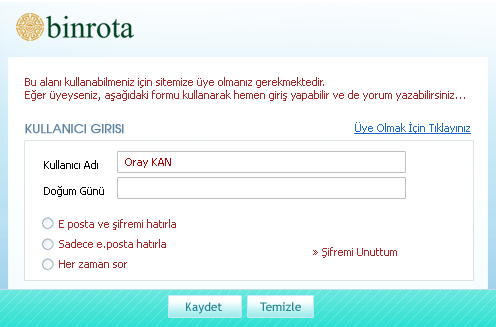
<style>
.page{position:relative;width:496px;height:327px;background:#ffffff}
.page>*{position:absolute;margin:0}
.t1{font:11px "Tahoma";color:#ab2626}
.t2{font:12px "TRAvalonPlain";color:#5e82a6;font-weight:bold}
.t3{font:11px "Tahoma";color:#1d6ccd;text-decoration:underline}
.t4{font:11px "Tahoma";color:#000000}
.t5{font:11px "Tahoma";color:#ad0505}
.t6{font:11px/20px "Tahoma";color:#ab2626}
.t7{font:12px "TrebuchetMS";color:#288493}
</style>
<div class="page">
<p class="t1" style="left:25px;top:77px;width:440px;height:24px">Bu alanı kullanabilmeniz için sitemize üye olmanız gerekmektedir. <br>Eğer üyeyseniz, aşağıdaki formu kullanarak hemen giriş yapabilir ve de yorum yazabilirsiniz...</p>
<p class="t2" style="left:25px;top:124px;width:99px;height:10px">KULLANICI GIRISI</p>
<p class="t3" style="left:354px;top:122px;width:117px;height:12px">Üye Olmak İçin Tıklayınız</p>
<p class="t4" style="left:44px;top:160px;width:54px;height:9px">Kullanıcı Adı</p>
<p class="t5" style="left:125px;top:158px;width:46px;height:10px">Oray KAN</p>
<p class="t4" style="left:44px;top:186px;width:60px;height:11px">Doğum Günü</p>
<p class="t6" style="left:59px;top:219px;width:117px;height:49px">E posta ve şifremi hatırla<br>Sadece e.posta hatırla<br>Her zaman sor</p>
<p class="t1" style="left:313px;top:247px;width:84px;height:11px">» Şifremi Unuttum</p>
<p class="t7" style="left:186px;top:302px;width:36px;height:12px">Kaydet</p>
<p class="t7" style="left:260px;top:302px;width:41px;height:9px">Temizle</p>
</div>
